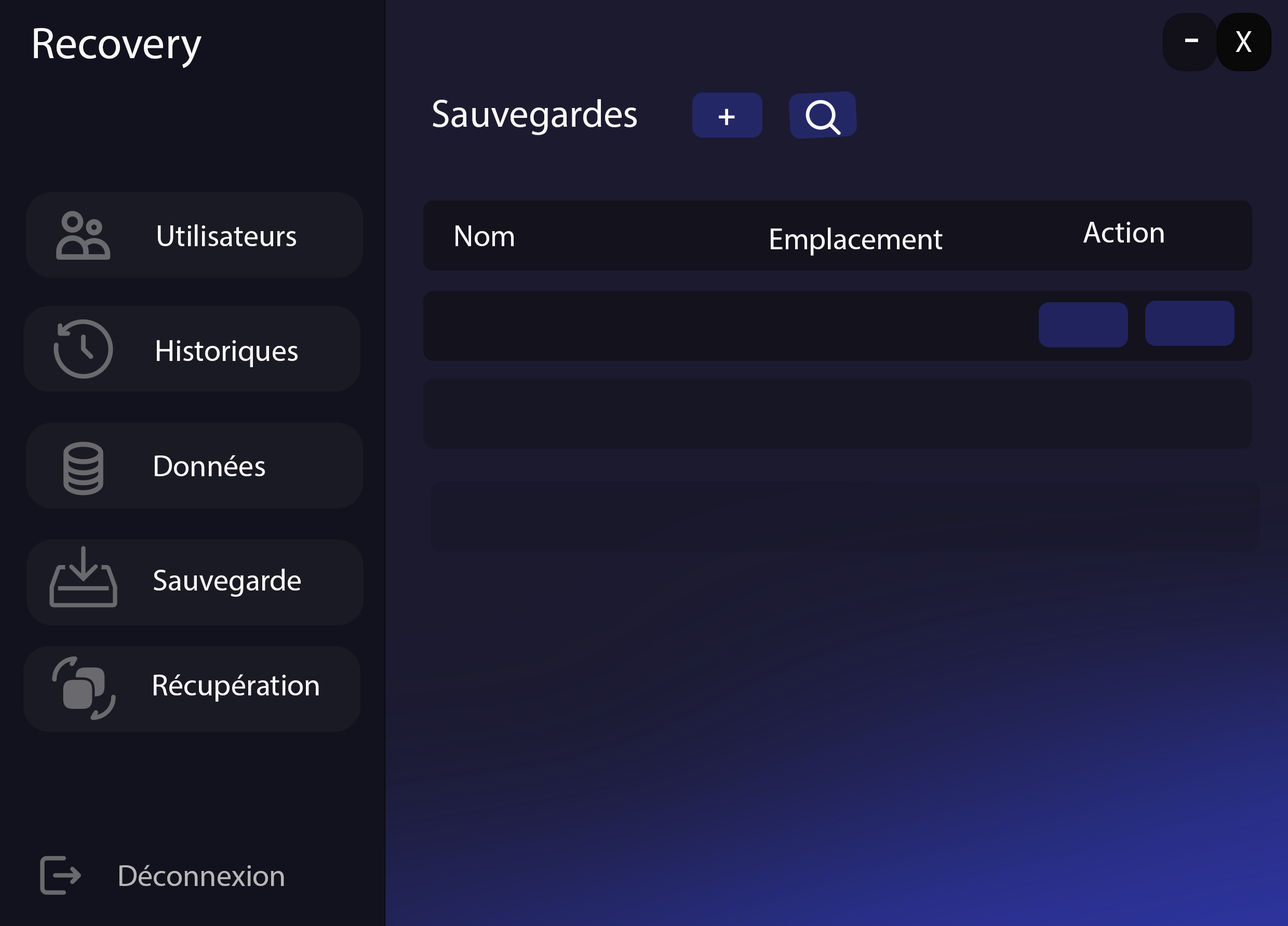
<style>
.page{position:relative;width:1288px;height:926px;background:#1b1a2f}
.page>*{position:absolute;margin:0}
.t1{font:44.8px "MyriadPro-Regular";color:#fcf9f9}
.t2{font:51.9px "MyriadPro-Regular";color:#fcf9f9}
.t3{font:30.3px "MyriadPro-Regular";color:#fcf9f9}
.t4{font:38.9px "MyriadPro-Regular";color:#fcf9f9}
.t5{font:30.3px "MyriadPro-Bold";color:#fcf9f9}
.t6{font:30.3px "MyriadPro-Regular";color:#b8b6b7}
</style>
<div class="page">
<p class="t1" style="left:34px;top:28px;width:167px;height:40px">Recovery</p>
<p class="t2" style="left:1185px;top:38px;width:13px;height:4px">-</p>
<p class="t3" style="left:1235px;top:31px;width:17px;height:21px">X</p>
<p class="t4" style="left:433px;top:99px;width:204px;height:36px">Sauvegardes</p>
<p class="t5" style="left:719px;top:109px;width:16px;height:16px">+</p>
<p class="t3" style="left:1083px;top:222px;width:81px;height:21px">Action</p>
<p class="t3" style="left:158px;top:224px;width:138px;height:22px">Utilisateurs</p>
<p class="t3" style="left:455px;top:225px;width:59px;height:21px">Nom</p>
<p class="t3" style="left:771px;top:227px;width:172px;height:28px">Emplacement</p>
<p class="t3" style="left:157px;top:340px;width:141px;height:27px">Historiques</p>
<p class="t3" style="left:155px;top:455px;width:110px;height:21px">Données</p>
<p class="t3" style="left:154px;top:569px;width:147px;height:28px">Sauvegarde</p>
<p class="t3" style="left:154px;top:674px;width:165px;height:28px">Récupération</p>
<p class="t6" style="left:119px;top:865px;width:165px;height:21px">Déconnexion</p>
</div>
